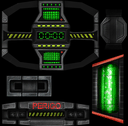
<style>
.page{position:relative;width:128px;height:126px;background:#000000}
.page>*{position:absolute;margin:0}
.t1{font:8.5px "Arial-BoldMT";letter-spacing:-0.02em;scale:0.89 1}
</style>
<div class="page">
<p class="t1" style="left:32px;top:102px;width:29px;height:7px">PERIGO</p>
</div>
